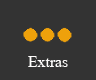
<style>
.page{position:relative;width:96px;height:80px;background:#333333}
.page>*{position:absolute;margin:0}
.t1{font:24px "AngsanaUPC";color:#fffefd}
</style>
<div class="page">
<p class="t1" style="left:28px;top:56px;width:40px;height:11px">Extras</p>
</div>
